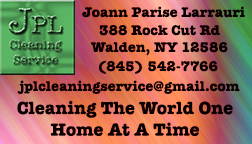
<style>
.page{position:relative;width:252px;height:144px}
.page>*{position:absolute;margin:0}
.t1{font:14.1px "AmericanTypewriter-Bold";color:#0a0003}
.t2{font:18px "AmericanTypewriter-Bold";color:#0a0003}
</style>
<div class="page">
<p class="t1" style="left:82px;top:6px;width:163px;height:12px">Joann Parise Larrauri</p>
<p class="t1" style="left:90px;top:25px;width:138px;height:31px;text-align:center">388 Rock Cut Rd<br>Walden, NY 12586</p>
<p class="t1" style="left:99px;top:60px;width:119px;height:14px">(845) 542-7766</p>
<p class="t1" style="left:17px;top:80px;width:223px;height:14px">jplcleaningservice@gmail.com</p>
<p class="t2" style="left:17px;top:100px;width:216px;height:36px;text-align:center">Cleaning The World One<br>Home At A Time</p>
</div>
